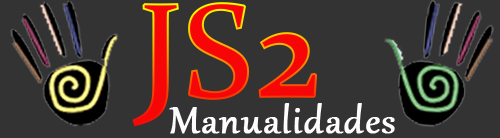
<style>
.page{position:relative;width:500px;height:138px;background:#333333}
.page>*{position:absolute;margin:0}
.t1{font:133px "Constantia";color:#f60606;font-weight:bold}
.t2{font:46px "Gabriola";letter-spacing:0.02em;color:#fdfdfe;font-weight:bold}
</style>
<div class="page">
<p class="t1" style="left:132px;top:2px;width:186px;height:125px">JS2</p>
<p class="t2" style="left:169px;top:103px;width:226px;height:31px">Manualidades</p>
</div>
